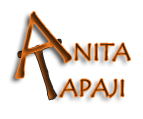
<style>
.page{position:relative;width:143px;height:119px;background:#ffffff}
.page>*{position:absolute;margin:0}
.t1{font:80px "TempusSansITC"}
.t2{font:24px "TempusSansITC";color:#4e270b}
.t3{font:24px "TempusSansITC"}
</style>
<div class="page">
<p class="t1" style="left:18px;top:39px;width:43px;height:61px;rotate:-19deg">T</p>
<p class="t2" style="left:75px;top:43px;width:55px;height:18px">NITA</p>
<p class="t3" style="left:59px;top:79px;width:65px;height:19px">APAJI</p>
</div>
